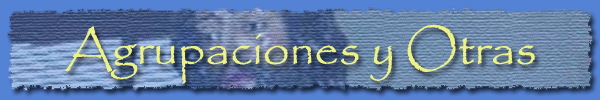
<style>
.page{position:relative;width:600px;height:100px}
.page>*{position:absolute;margin:0}
.t1{font:48px "Papyrus-Regular";color:#ecf287}
</style>
<div class="page">
<p class="t1" style="left:65px;top:24px;width:470px;height:60px">Agrupaciones y Otras</p>
</div>
